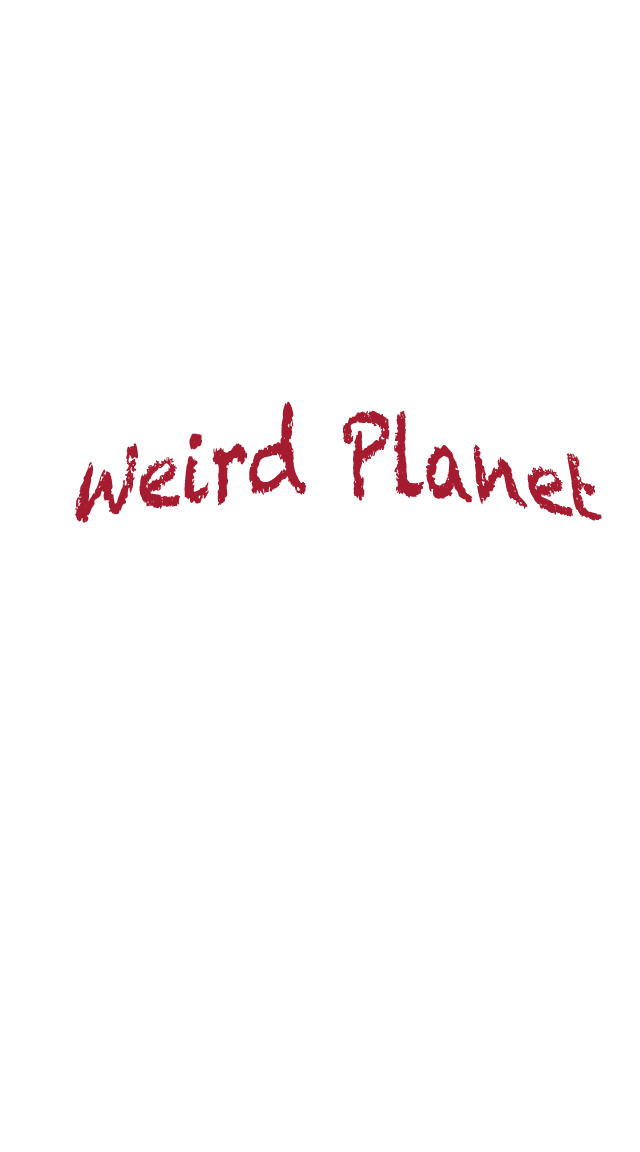
<style>
.page{position:relative;width:640px;height:1152px;background:#ffffff}
.page>*{position:absolute;margin:0}
.t1{font:72px "Chalkduster";color:#a51c30}
</style>
<div class="page">
<p class="t1" style="left:74px;top:401px;width:528px;height:122px">Weird Planet</p>
</div>
